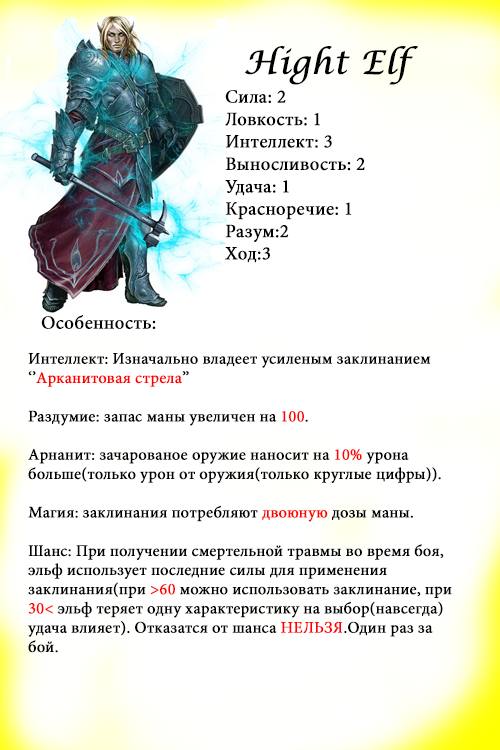
<style>
.page{position:relative;width:500px;height:750px;background:#ffffff}
.page>*{position:absolute;margin:0}
.t1{font:32px "LucidaCalligraphy-Italic";color:#000000;font-weight:bold}
.t2{font:18.7px "MinionPro-Regular";color:#000000;font-weight:bold}
.t3{font:16px "MinionPro-Regular";color:#000000;font-weight:bold}
.t4{font:16px "MinionPro-Regular";color:#ff0000;font-weight:bold}
.t5{font:16px "MinionPro-Regular";color:#fe0000;font-weight:bold}
</style>
<div class="page">
<p class="t1" style="left:245px;top:46px;width:173px;height:39px">Hight Elf</p>
<p class="t2" style="left:225px;top:90px;width:140px;height:173px">Сила: 2<br>Ловкость: 1<br>Интеллект: 3<br>Выносливость: 2<br>Удача: 1<br>Красноречие: 1<br>Разум:2<br>Ход:3</p>
<p class="t2" style="left:41px;top:315px;width:115px;height:14px">Особенность:</p>
<p class="t3" style="left:28px;top:353px;width:424px;height:300px">Интеллект: Изначально владеет усиленым заклинанием      ‘’<span class="t4">Арканитовая стрела</span>’’<br><br>Раздумие: запас маны увеличен на <span class="t4">100</span>.<br><br>Арнанит: зачарованое оружие наносит на <span class="t4">10%</span> урона <br>больше(только урон от оружия(только круглые цифры)). <br><br>Магия: заклинания потребляют <span class="t4">двоюную</span> дозы маны.<br><br>Шанс: При получении смертельной травмы во время боя, эльф использует последние силы для применения <br>заклинания(при <span class="t4">&gt;60 </span>можно использовать заклинание, при <span class="t5">30&lt;</span> эльф теряет одну характеристику на выбор(навсегда) удача влияет). Отказатся от шанса <span class="t4">НЕЛЬЗЯ</span>.Один раз за бой.</p>
</div>
